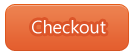
<style>
.page{position:relative;width:134px;height:55px;background:#ffffff}
.page>*{position:absolute;margin:0}
.t1{font:18px "SegoeUI";color:#ffffff}
</style>
<div class="page">
<p class="t1" style="left:32px;top:20px;width:74px;height:14px">Checkout</p>
</div>
